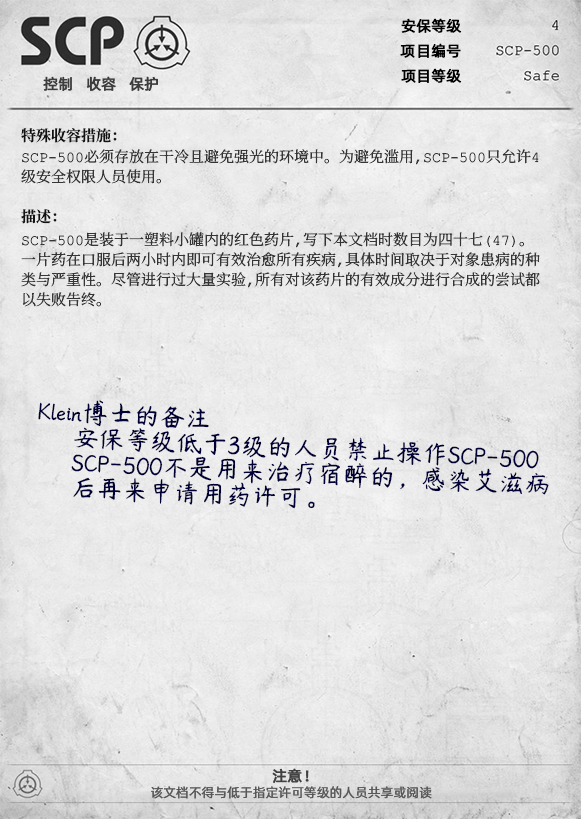
<style>
.page{position:relative;width:581px;height:819px}
.page>*{position:absolute;margin:0}
.t1{font:15px "AlibabaPuHuiTiR";color:#000000;font-weight:bold}
.t2{font:15px "AlibabaPuHuiTiR";color:#3d3d3d;font-weight:bold}
.t3{font:15px "ContainmentBreach-Bold";color:#121212}
.t4{font:15px/20px "ContainmentBreach-Regular";color:#353535}
.t5{font:26px/25px "YRDZST-Medium";color:#000037}
.t6{font:15px "AlibabaPuHuiTiR";color:#414141;font-weight:bold}
.t7{font:13px "AlibabaPuHuiTiR";color:#575757}
</style>
<div class="page">
<p class="t1" style="left:401px;top:18px;width:61px;height:15px">安保等级</p>
<p class="t1" style="left:400px;top:43px;width:61px;height:15px">项目编号</p>
<p class="t2" style="left:43px;top:76px;width:115px;height:15px">控制   收容   保护</p>
<p class="t1" style="left:401px;top:68px;width:61px;height:15px">项目等级</p>
<p class="t3" style="left:21px;top:128px;width:96px;height:15px">特殊收容措施：</p>
<p class="t4" style="left:21px;top:149px;width:518px;height:35px">SCP-500必须存放在干冷且避免强光的环境中。为避免滥用，SCP-500只允许4<br>级安全权限人员使用。</p>
<p class="t3" style="left:21px;top:209px;width:36px;height:15px">描述：</p>
<p class="t4" style="left:21px;top:232px;width:519px;height:75px">SCP-500是装于一塑料小罐内的红色药片，写下本文档时数目为四十七（47）。<br>一片药在口服后两小时内即可有效治愈所有疾病，具体时间取决于对象患病的种<br>类与严重性。尽管进行过大量实验，所有对该药片的有效成分进行合成的尝试都<br>以失败告终。</p>
<p class="t5" style="left:38px;top:400px;width:511px;height:109px;rotate:3deg">Klein博士的备注<br> 安保等级低于3级的人员禁止操作SCP-500<br> SCP-500不是用来治疗宿醉的，感染艾滋病<br> 后再来申请用药许可。</p>
<p class="t6" style="left:272px;top:768px;width:37px;height:15px">注意！</p>
<p class="t7" style="left:151px;top:786px;width:281px;height:13px">该文档不得与低于指定许可等级的人员共享或阅读</p>
</div>
